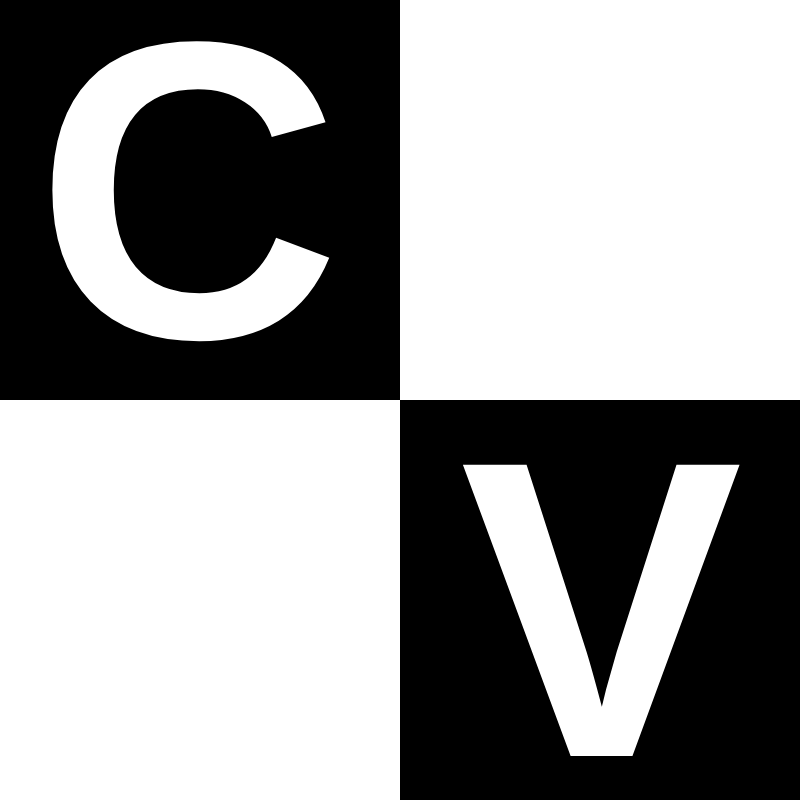
<style>
.page{position:relative;width:800px;height:800px;background:#ffffff}
.page>*{position:absolute;margin:0}
.t1{font:423.5px "Helvetica-Bold";color:#ffffff}
</style>
<div class="page">
<p class="t1" style="left:52px;top:41px;width:278px;height:301px">C</p>
<p class="t1" style="left:462px;top:464px;width:278px;height:292px">V</p>
</div>
